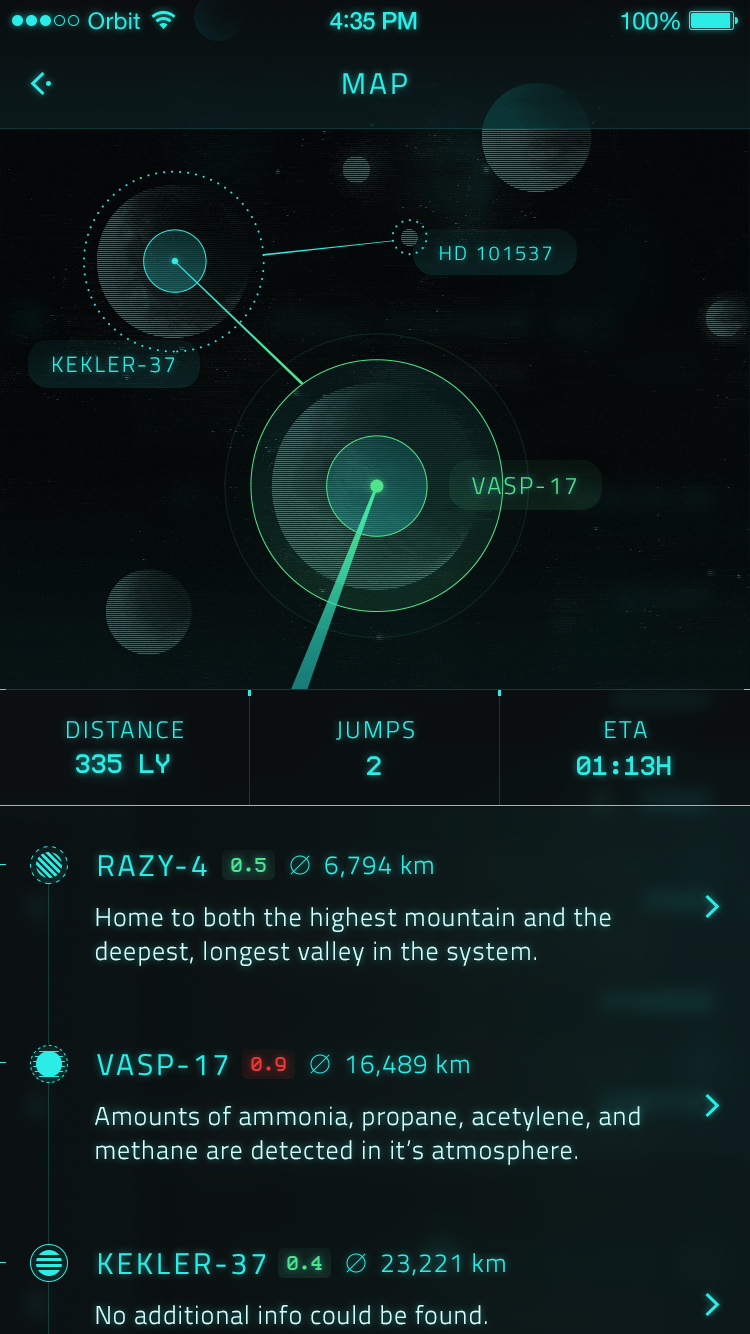
<style>
.page{position:relative;width:750px;height:1334px}
.page>*{position:absolute;margin:0}
.t1{font:23px "HelveticaNeue";letter-spacing:0.02em;color:#2bede6}
.t2{font:24px "HelveticaNeue-Medium";letter-spacing:-0.02em;color:#2bede6}
.t3{font:26px "Avenir-Medium";letter-spacing:-0.02em;color:#2bede6}
.t4{font:24px "HelveticaNeue";letter-spacing:-0.02em;color:#2bede6}
.t5{font:30px "Titillium-Regular";letter-spacing:0.1em;color:#2bede6;text-transform:uppercase}
.t6{font:20px "Titillium-Light";letter-spacing:0.1em;color:#2bede6;text-transform:uppercase}
.t7{font:22px "Titillium-Light";letter-spacing:0.1em;color:#2bede6;text-transform:uppercase}
.t8{font:24px "Titillium-Light";letter-spacing:0.1em;color:#4fe38b;text-transform:uppercase}
.t9{font:24px "Titillium-Light";letter-spacing:0.1em;color:#2bede6;text-transform:uppercase}
.t10{font:32px "ProFontWindows";color:#2bede6;text-transform:uppercase}
.t11{font:30px "Titillium-Regular";letter-spacing:0.1em;color:#2bede6}
.t12{font:26px "Titillium-Light";letter-spacing:0.04em;color:#2bede6}
.t13{font:24px "ProFontWindows";color:#4fe38b;text-transform:uppercase}
.t14{font:26px/34px "Titillium-Light";letter-spacing:0.04em;color:#d6fffd}
.t15{font:24px "ProFontWindows";color:#ed3737;text-transform:uppercase}
.t16{font:26px "Titillium-Light";letter-spacing:0.04em;color:#d6fffd}
</style>
<div class="page">
<p class="t1" style="left:88px;top:12px;width:52px;height:18px">Orbit</p>
<p class="t2" style="left:330px;top:12px;width:87px;height:18px">4<span class="t3">:</span>35 PM</p>
<p class="t4" style="left:621px;top:12px;width:59px;height:18px">100%</p>
<p class="t5" style="left:343px;top:73px;width:64px;height:21px">Map</p>
<p class="t6" style="left:440px;top:246px;width:111px;height:15px">HD 101537</p>
<p class="t7" style="left:53px;top:356px;width:121px;height:17px">KeKler-37</p>
<p class="t8" style="left:472px;top:477px;width:104px;height:18px">VASP-17</p>
<p class="t9" style="left:67px;top:721px;width:116px;height:18px">DISTANCE</p>
<p class="t9" style="left:336px;top:721px;width:78px;height:19px">JUMPS</p>
<p class="t9" style="left:605px;top:721px;width:42px;height:17px">ETA</p>
<p class="t10" style="left:76px;top:754px;width:94px;height:19px">335 LY</p>
<p class="t10" style="left:367px;top:756px;width:14px;height:19px">2</p>
<p class="t10" style="left:577px;top:756px;width:94px;height:19px">01:13h</p>
<p class="t11" style="left:99px;top:855px;width:108px;height:21px">RAZY-4</p>
<p class="t12" style="left:325px;top:855px;width:108px;height:23px">6,794 km</p>
<p class="t13" style="left:231px;top:858px;width:35px;height:14px">0.5</p>
<p class="t14" style="left:96px;top:907px;width:515px;height:59px">Home to both the highest mountain and the deepest, longest valley in the system.</p>
<p class="t11" style="left:97px;top:1054px;width:130px;height:22px">VASP-17</p>
<p class="t15" style="left:251px;top:1057px;width:35px;height:14px">0.9</p>
<p class="t12" style="left:347px;top:1054px;width:122px;height:23px">16,489 km</p>
<p class="t14" style="left:95px;top:1106px;width:545px;height:59px">Amounts of ammonia, propane, acetylene, and methane are detected in it’s atmosphere.</p>
<p class="t11" style="left:99px;top:1253px;width:166px;height:22px">KEKLER-37</p>
<p class="t12" style="left:382px;top:1253px;width:123px;height:23px">23,221 km</p>
<p class="t13" style="left:287px;top:1256px;width:35px;height:14px">0.4</p>
<p class="t16" style="left:96px;top:1305px;width:391px;height:20px">No additional info could be found.</p>
</div>
